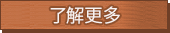
<style>
.page{position:relative;width:170px;height:33px}
.page>*{position:absolute;margin:0}
.t1{font:18px "KozGoPr6N-Regular";color:#f8f3f1}
</style>
<div class="page">
<p class="t1" style="left:50px;top:6px;width:70px;height:18px">了解更多</p>
</div>
